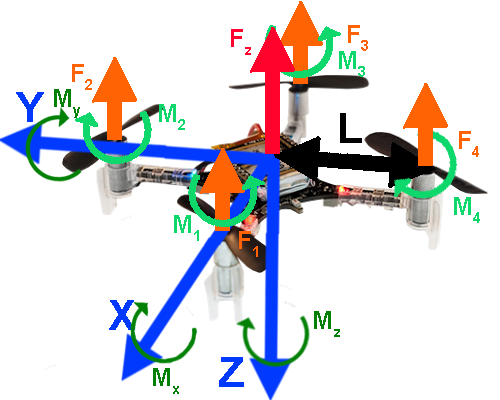
<style>
.page{position:relative;width:500px;height:400px;background:#ffffff}
.page>*{position:absolute;margin:0}
.t1{font:25px "Arial-BoldMT";color:#ff032d}
.t2{font:25px "Arial-BoldMT";color:#ff6303}
.t3{font:25px "Arial-BoldMT";color:#0ed76c}
.t4{font:25px "Arial-BoldMT";color:#028106}
.t5{font:42px "Arial-BoldMT";color:#0239ff}
.t6{font:42px "Arial-BoldMT";color:#000000}
</style>
<div class="page">
<p class="t1" style="left:231px;top:29px;width:20px;height:26px">Fz</p>
<p class="t2" style="left:348px;top:25px;width:20px;height:26px">F3</p>
<p class="t3" style="left:339px;top:51px;width:26px;height:26px">M3</p>
<p class="t2" style="left:72px;top:64px;width:20px;height:26px">F2</p>
<p class="t4" style="left:54px;top:89px;width:26px;height:29px">My</p>
<p class="t5" style="left:16px;top:92px;width:28px;height:30px">Y</p>
<p class="t3" style="left:159px;top:104px;width:26px;height:26px">M2</p>
<p class="t6" style="left:340px;top:113px;width:22px;height:30px">L</p>
<p class="t2" style="left:459px;top:131px;width:20px;height:26px">F4</p>
<p class="t3" style="left:454px;top:197px;width:26px;height:26px">M4</p>
<p class="t3" style="left:174px;top:215px;width:25px;height:26px">M1</p>
<p class="t2" style="left:239px;top:231px;width:19px;height:26px">F1</p>
<p class="t5" style="left:109px;top:300px;width:26px;height:30px">X</p>
<p class="t4" style="left:314px;top:311px;width:26px;height:26px">Mz</p>
<p class="t5" style="left:219px;top:357px;width:25px;height:30px">Z</p>
<p class="t4" style="left:153px;top:368px;width:26px;height:26px">Mx</p>
</div>
